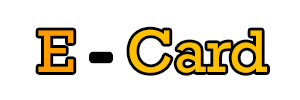
<style>
.page{position:relative;width:300px;height:100px;background:#ffffff}
.page>*{position:absolute;margin:0}
.t1{font:61.1px "Rockwell";color:#ffc000}
.t2{font:61.1px "Rockwell";color:#ff9c00}
.t3{font:61.1px "Rockwell";color:#000000}
</style>
<div class="page">
<p class="t1" style="left:38px;top:29px;width:229px;height:44px"><span class="t2">E </span><span class="t3">- </span>Card</p>
</div>
